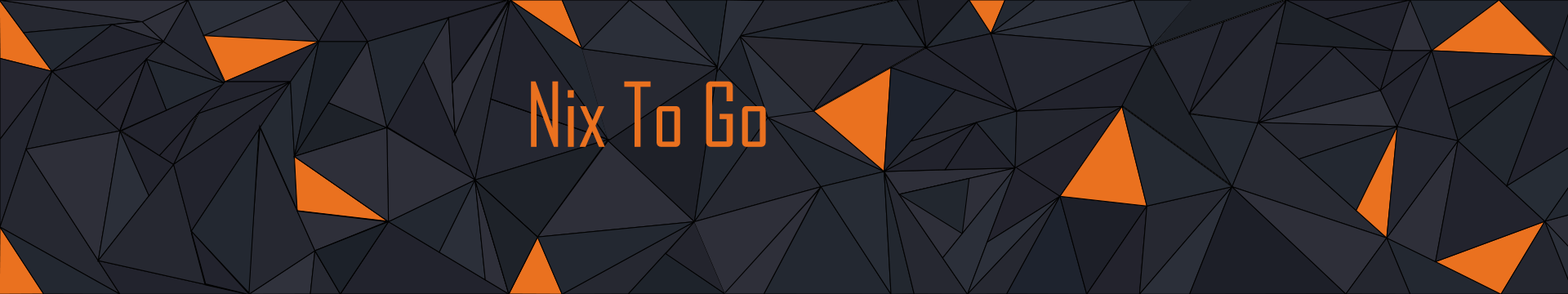
<style>
.page{position:relative;width:1568px;height:294px}
.page>*{position:absolute;margin:0}
.t1{font:85.1px "AgencyFB-Reg";color:#ea711f}
</style>
<div class="page">
<p class="t1" style="left:531px;top:81px;width:235px;height:66px">Nix To Go</p>
</div>
